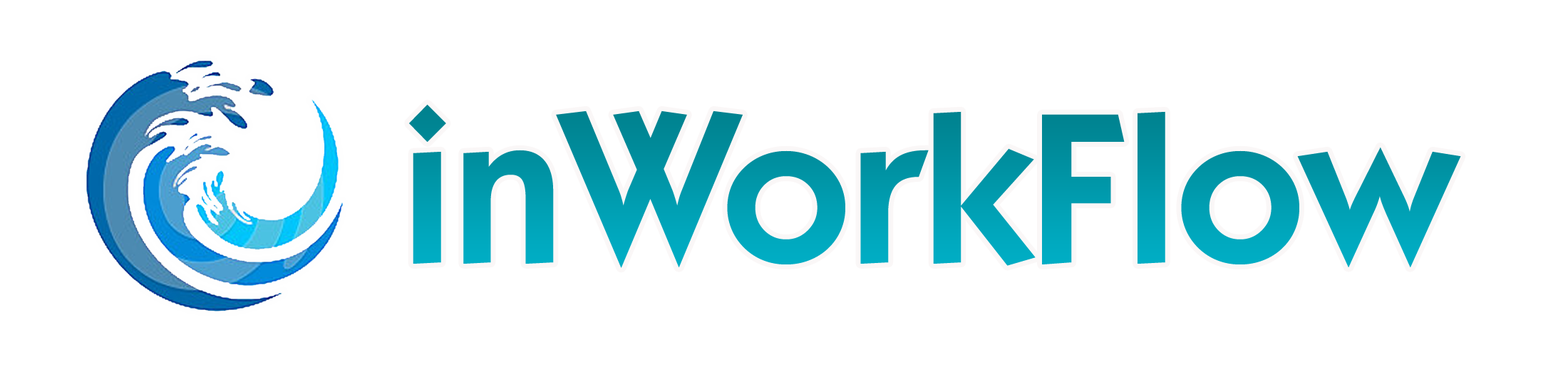
<style>
.page{position:relative;width:1568px;height:392px;background:#ffffff}
.page>*{position:absolute;margin:0}
.t1{font:213.8px "KabelITCbyBT-Demi";color:#009aad}
</style>
<div class="page">
<p class="t1" style="left:409px;top:104px;width:1052px;height:164px">inWorkFlow</p>
</div>
